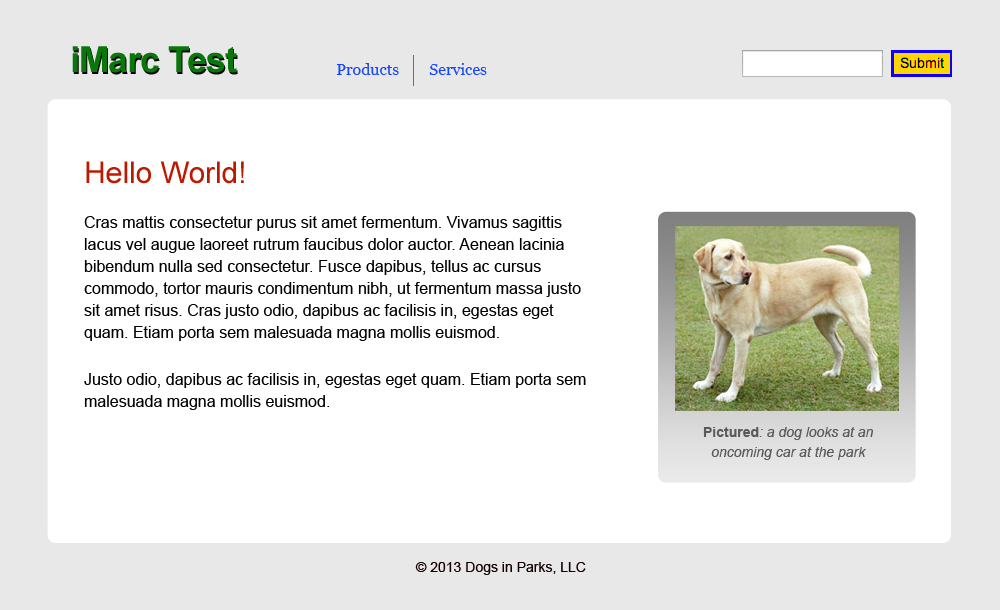
<style>
.page{position:relative;width:1000px;height:610px;background:#ffffff}
.page>*{position:absolute;margin:0}
.t1{font:36px "Arial-BoldMT";letter-spacing:-0.025em;color:#08780a}
.t2{font:16px "Georgia";color:#1646f7}
.t3{font:30px "ArialMT";color:#b91a00}
.t4{font:16px/22px "ArialMT";color:#000000}
.t5{font:14px/20px "Arial-ItalicMT";color:#5a5a5a}
.t6{font:14px/20px "Arial-BoldMT";color:#5a5a5a}
.t7{font:14px "ArialMT";color:#120101}
</style>
<div class="page">
<p class="t1" style="left:72px;top:46px;width:165px;height:27px">iMarc Test</p>
<p class="t2" style="left:336px;top:63px;width:63px;height:12px">Products</p>
<p class="t2" style="left:429px;top:63px;width:58px;height:12px">Services</p>
<p class="t3" style="left:86px;top:161px;width:158px;height:23px">Hello World!</p>
<p class="t4" style="left:84px;top:216px;width:497px;height:125px">Cras mattis consectetur purus sit amet fermentum. Vivamus sagittis lacus vel augue laoreet rutrum faucibus dolor auctor. Aenean lacinia bibendum nulla sed consectetur. Fusce dapibus, tellus ac cursus commodo, tortor mauris condimentum nibh, ut fermentum massa justo sit amet risus. Cras justo odio, dapibus ac facilisis in, egestas eget quam. Etiam porta sem malesuada magna mollis euismod.</p>
<p class="t4" style="left:84px;top:373px;width:502px;height:37px">Justo odio, dapibus ac facilisis in, egestas eget quam. Etiam porta sem malesuada magna mollis euismod.</p>
<p class="t5" style="left:703px;top:427px;width:170px;height:33px;text-align:center"><span class="t6">Pictured</span>: a dog looks at an oncoming car at the park</p>
<p class="t7" style="left:415px;top:562px;width:171px;height:13px">© 2013 Dogs in Parks, LLC</p>
</div>
